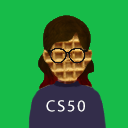
<style>
.page{position:relative;width:128px;height:128px;background:#17bb49}
.page>*{position:absolute;margin:0}
.t1{font:16px "MyriadPro-Regular";letter-spacing:0.12em;color:#ffffff;text-transform:uppercase}
</style>
<div class="page">
<p class="t1" style="left:46px;top:100px;width:39px;height:12px">cs50</p>
</div>
